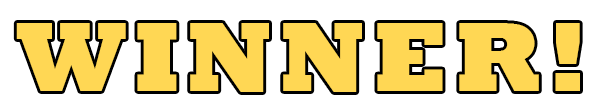
<style>
.page{position:relative;width:604px;height:111px;background:#ffffff}
.page>*{position:absolute;margin:0}
.t1{font:100px "Rockwell-ExtraBold";letter-spacing:0.075em;color:#ffd754}
</style>
<div class="page">
<p class="t1" style="left:16px;top:23px;width:564px;height:69px">WINNER!</p>
</div>
